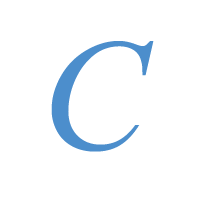
<style>
.page{position:relative;width:200px;height:200px;background:#ffffff}
.page>*{position:absolute;margin:0}
.t1{font:198.1px "Vijaya";color:#4c8ecc}
</style>
<div class="page">
<p class="t1" style="left:51px;top:41px;width:103px;height:111px">C</p>
</div>
